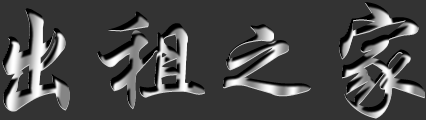
<style>
.page{position:relative;width:426px;height:120px;background:#333333}
.page>*{position:absolute;margin:0}
.t1{font:120px "JQXingKaiJT"}
.t2{font:100px "JQXingKaiJT"}
</style>
<div class="page">
<p class="t1" style="left:339px;top:2px;width:86px;height:116px">家</p>
<p class="t1" style="left:2px;top:8px;width:68px;height:103px">出</p>
<p class="t1" style="left:97px;top:11px;width:108px;height:98px">租</p>
<p class="t2" style="left:223px;top:24px;width:88px;height:72px">之</p>
</div>
